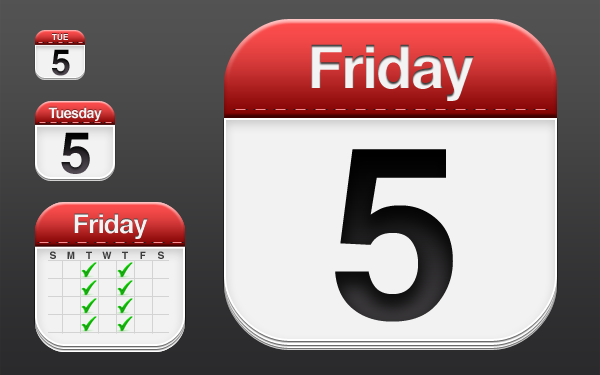
<style>
.page{position:relative;width:600px;height:375px;background:#f2f2f2}
.page>*{position:absolute;margin:0}
.t1{font:8.4px "Helvetica-Bold";color:#f3f3f3}
.t2{font:36px "Helvetica-Bold";letter-spacing:-0.04em}
.t3{font:60px "Helvetica-Bold";letter-spacing:-0.04em;color:#f3f3f3}
.t4{font:14px "Helvetica-Bold";letter-spacing:-0.03em;color:#f3f3f3}
.t5{font:57.7px "Helvetica-Bold";letter-spacing:-0.04em}
.t6{font:240px "Helvetica-Bold";letter-spacing:-0.04em;color:#131313}
.t7{font:27px "Helvetica-Bold";letter-spacing:-0.04em;color:#f3f3f3}
.t8{font:10px "Helvetica-Bold";letter-spacing:-0.04em;color:#3c3c3c}
</style>
<div class="page">
<p class="t1" style="left:52px;top:34px;width:16px;height:6px">TUE</p>
<p class="t2" style="left:52px;top:49px;width:18px;height:27px">5</p>
<p class="t3" style="left:311px;top:44px;width:163px;height:57px">Friday</p>
<p class="t4" style="left:48px;top:107px;width:54px;height:14px">Tuesday</p>
<p class="t5" style="left:61px;top:132px;width:29px;height:42px">5</p>
<p class="t6" style="left:335px;top:149px;width:118px;height:173px">5</p>
<p class="t7" style="left:74px;top:213px;width:74px;height:26px">Friday</p>
<p class="t8" style="left:50px;top:251px;width:6px;height:8px">S</p>
<p class="t8" style="left:67px;top:251px;width:8px;height:8px">M</p>
<p class="t8" style="left:86px;top:251px;width:6px;height:8px">T</p>
<p class="t8" style="left:102px;top:251px;width:10px;height:8px">W</p>
<p class="t8" style="left:122px;top:251px;width:6px;height:8px">T</p>
<p class="t8" style="left:140px;top:251px;width:6px;height:8px">F</p>
<p class="t8" style="left:158px;top:251px;width:6px;height:8px">S</p>
</div>
